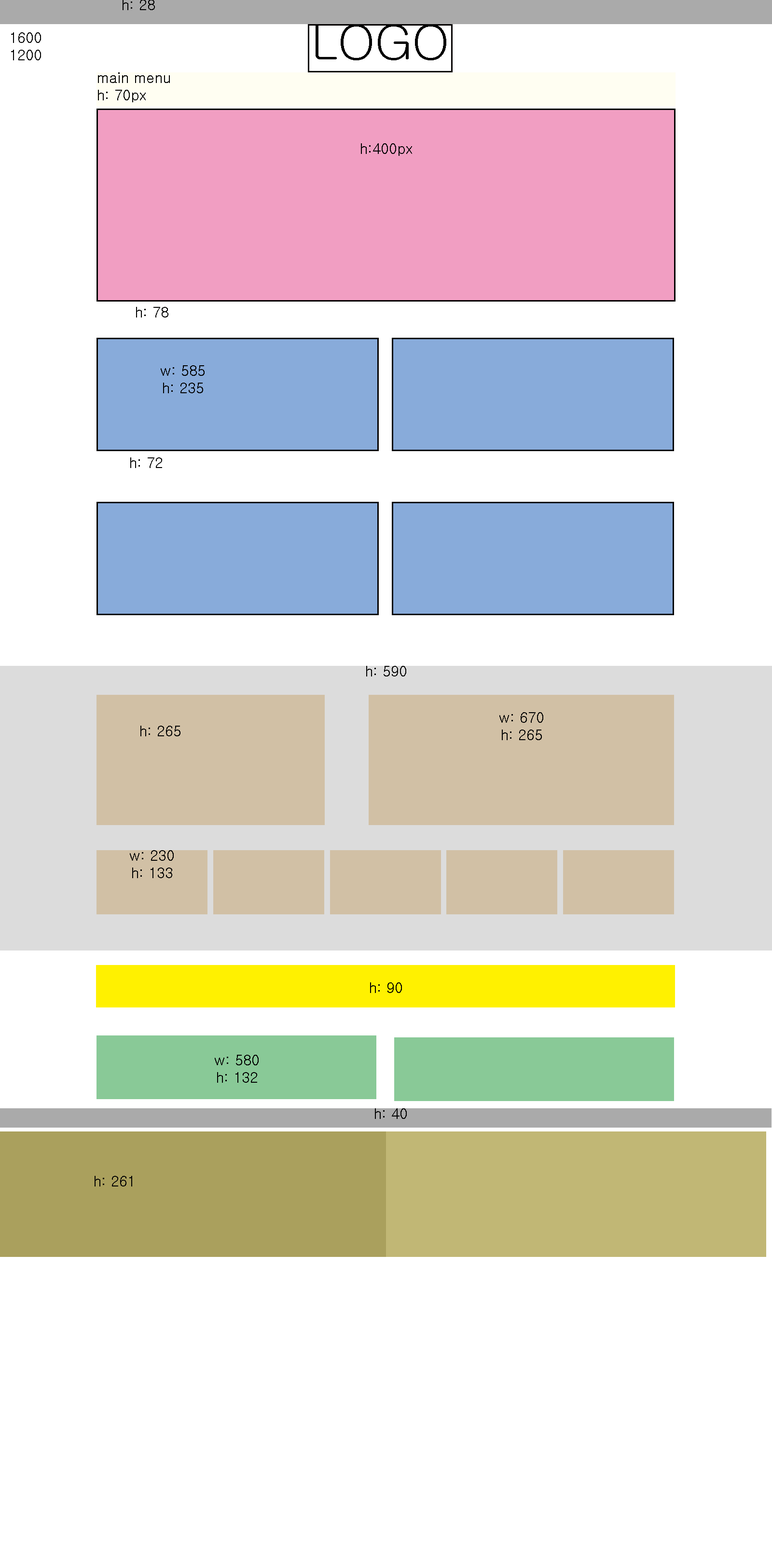
<style>
.page{position:relative;width:772px;height:1544px;background:#ffffff}
.page>*{position:absolute;margin:0}
.t1{font:14.5px "Gulim";color:#000000}
.t2{font:48.3px "Gulim";color:#000000}
</style>
<div class="page">
<p class="t1" style="left:123px;top:0px;width:32px;height:10px">h: 28</p>
<p class="t2" style="left:316px;top:24px;width:130px;height:36px">LOGO</p>
<p class="t1" style="left:11px;top:32px;width:30px;height:28px;text-align:center">1600<br>1200</p>
<p class="t1" style="left:98px;top:72px;width:72px;height:30px">main menu<br>h: 70px</p>
<p class="t1" style="left:361px;top:143px;width:51px;height:13px">h:400px</p>
<p class="t1" style="left:136px;top:307px;width:32px;height:11px">h: 78</p>
<p class="t1" style="left:161px;top:365px;width:44px;height:28px;text-align:center">w: 585<br>h: 235</p>
<p class="t1" style="left:130px;top:457px;width:32px;height:11px">h: 72</p>
<p class="t1" style="left:366px;top:666px;width:40px;height:11px">h: 590</p>
<p class="t1" style="left:499px;top:712px;width:44px;height:28px;text-align:center">w: 670<br>h: 265</p>
<p class="t1" style="left:140px;top:726px;width:40px;height:10px">h: 265</p>
<p class="t1" style="left:130px;top:850px;width:44px;height:28px;text-align:center">w: 230<br>h: 133</p>
<p class="t1" style="left:370px;top:983px;width:32px;height:10px">h: 90</p>
<p class="t1" style="left:215px;top:1055px;width:44px;height:28px;text-align:center">w: 580<br>h: 132</p>
<p class="t1" style="left:375px;top:1109px;width:32px;height:10px">h: 40</p>
<p class="t1" style="left:95px;top:1176px;width:37px;height:11px">h: 261</p>
</div>
